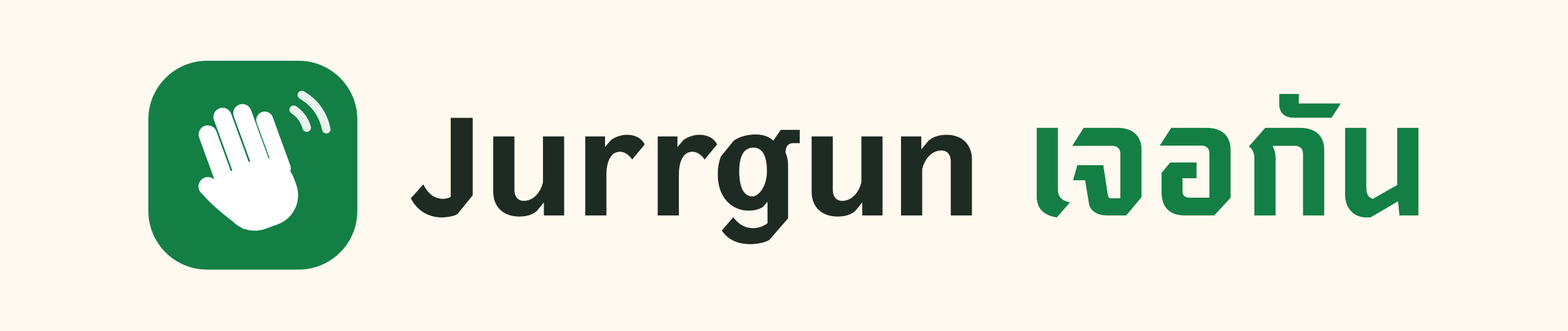
<style>
.page{position:relative;width:1568px;height:331px;background:#fff9f0}
.page>*{position:absolute;margin:0}
.t1{font:143.7px "SaoChingcha-Bold";color:#137f45}
.t2{font:143.7px "SaoChingcha-Bold";color:#1e2b22}
</style>
<div class="page">
<p class="t1" style="left:1036px;top:93px;width:384px;height:126px">เจอกัน</p>
<p class="t2" style="left:410px;top:118px;width:563px;height:127px">Jurrgun</p>
</div>
